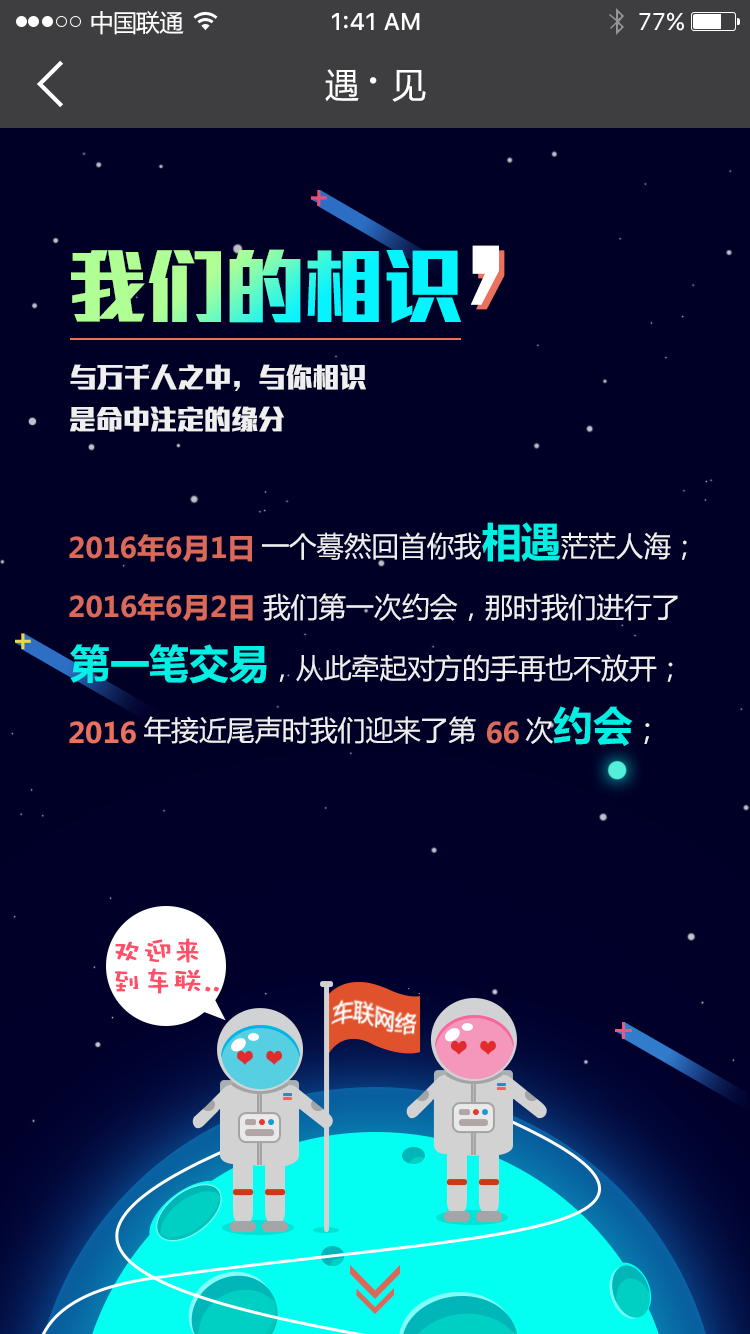
<style>
.page{position:relative;width:750px;height:1334px;background:#000026}
.page>*{position:absolute;margin:0}
.t1{font:24px "MicrosoftYaHei";letter-spacing:-0.025em;color:#ffffff}
.t2{font:24px "SFUIText-Medium";color:#ffffff}
.t3{font:24px "SFUIText-Regular";color:#ffffff}
.t4{font:34px "MicrosoftYaHei";letter-spacing:-0.025em;color:#ffffff}
.t5{font:50px "MicrosoftYaHei";letter-spacing:-0.025em;color:#ffffff}
.t6{font:239.7px "WenQuanYiZenHei";letter-spacing:-0.04em;color:#ffffff}
.t7{font:81.8px "MStiffHeiPRC-UltraBold";letter-spacing:-0.025em}
.t8{font:239.7px "WenQuanYiZenHei";letter-spacing:-0.04em}
.t9{font:28px "MStiffHeiPRC-UltraBold";letter-spacing:-0.025em;color:#ffffff}
.t10{font:28.2px "MicrosoftYaHei-Bold";color:#ea715e}
.t11{font:28px "MicrosoftYaHei";color:#ffffff}
.t12{font:40.4px "MicrosoftYaHei-Bold";color:#02fff1}
.t13{font:28px "MicrosoftYaHei-Bold";color:#ea715e}
.t14{font:27.9px "MicrosoftYaHei";color:#ffffff}
.t15{font:39.9px "MicrosoftYaHei-Bold";color:#02fff1}
.t16{font:40.1px "MicrosoftYaHei-Bold";color:#02fff1}
.t17{font:30.1px "MicrosoftYaHei";color:#ffffff}
.t18{font:28px "MicrosoftYaHei-Bold";color:#db6a5a}
.t19{font:30px/30px "DFPWaWaW5";color:#ff4f69;font-weight:bold}
</style>
<div class="page">
<p class="t1" style="left:91px;top:11px;width:93px;height:24px">中国联通</p>
<p class="t2" style="left:332px;top:13px;width:88px;height:17px">1:41 AM</p>
<p class="t3" style="left:639px;top:12px;width:45px;height:19px">77%</p>
<p class="t4" style="left:325px;top:69px;width:101px;height:33px">遇 <span class="t5">· </span>见</p>
<p class="t6" style="left:471px;top:245px;width:28px;height:60px">，</p>
<p class="t7" style="left:71px;top:249px;width:390px;height:74px">我们的相识</p>
<p class="t8" style="left:476px;top:250px;width:29px;height:60px">，</p>
<p class="t9" style="left:70px;top:364px;width:296px;height:27px;opacity:0.9">与万千人之中，与你相识</p>
<p class="t9" style="left:70px;top:406px;width:214px;height:26px;opacity:0.9">是命中注定的缘分</p>
<p class="t10" style="left:69px;top:534px;width:183px;height:28px;opacity:0.9">2016年6月1日</p>
<p class="t11" style="left:262px;top:522px;width:425px;height:40px;opacity:0.9">一个蓦然回首你我<span class="t12">相遇</span>茫茫人海；</p>
<p class="t13" style="left:69px;top:593px;width:184px;height:28px;opacity:0.9">2016年6月2日</p>
<p class="t11" style="left:263px;top:593px;width:415px;height:28px;opacity:0.9">我们第一次约会，那时我们进行了</p>
<p class="t14" style="left:70px;top:644px;width:603px;height:40px;opacity:0.9"><span class="t15">第一笔交易</span>，从此牵起对方的手再也不放开；</p>
<p class="t11" style="left:144px;top:706px;width:506px;height:40px;opacity:0.9">年接近尾声时我们迎来了第      次<span class="t16">约会</span><span class="t17">；</span></p>
<p class="t13" style="left:69px;top:721px;width:67px;height:23px">2016</p>
<p class="t18" style="left:487px;top:721px;width:32px;height:23px">66</p>
<p class="t19" style="left:115px;top:938px;width:104px;height:56px">欢迎来<br>到车联..</p>
</div>
